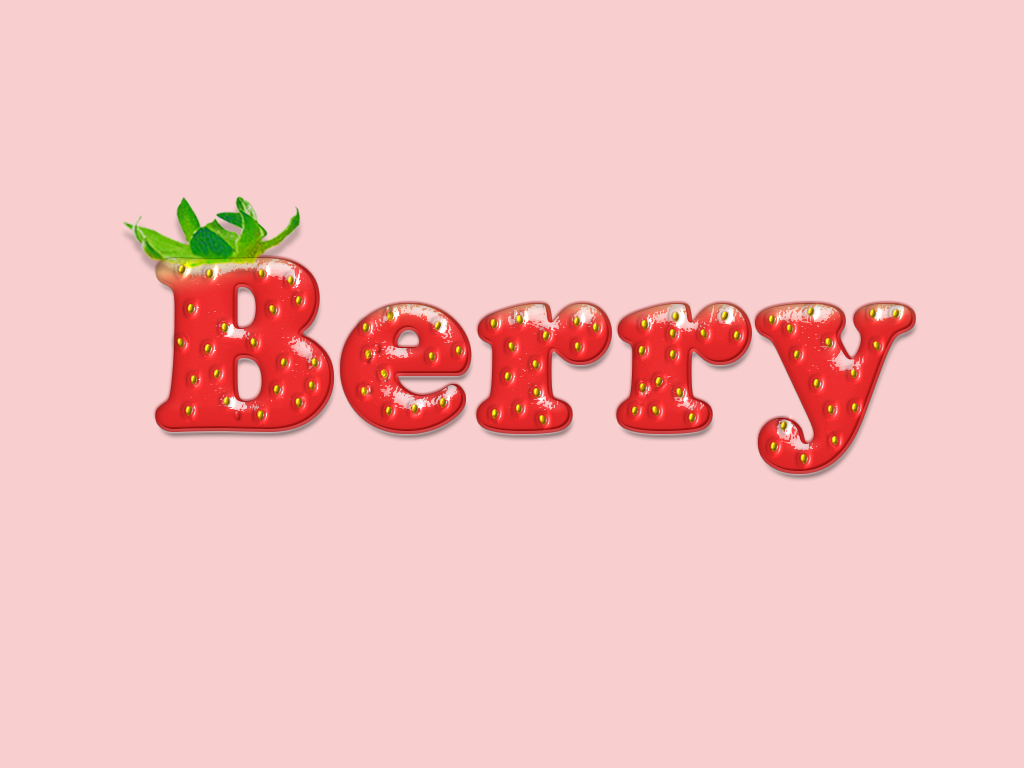
<style>
.page{position:relative;width:1024px;height:768px;background:#f8cece}
.page>*{position:absolute;margin:0}
.t1{font:250px "CooperBlack";letter-spacing:0.02em}
</style>
<div class="page">
<p class="t1" style="left:156px;top:258px;width:755px;height:211px">Berry</p>
<p class="t1" style="left:156px;top:258px;width:755px;height:211px">Berry</p>
<p class="t1" style="left:158px;top:260px;width:755px;height:211px">Berry</p>
</div>
